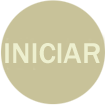
<style>
.page{position:relative;width:105px;height:105px;background:#c8c299}
.page>*{position:absolute;margin:0}
.t1{font:29.8px "FranklinGothic-Medium";color:#edefcf}
</style>
<div class="page">
<p class="t1" style="left:5px;top:43px;width:95px;height:21px">INICIAR</p>
</div>
